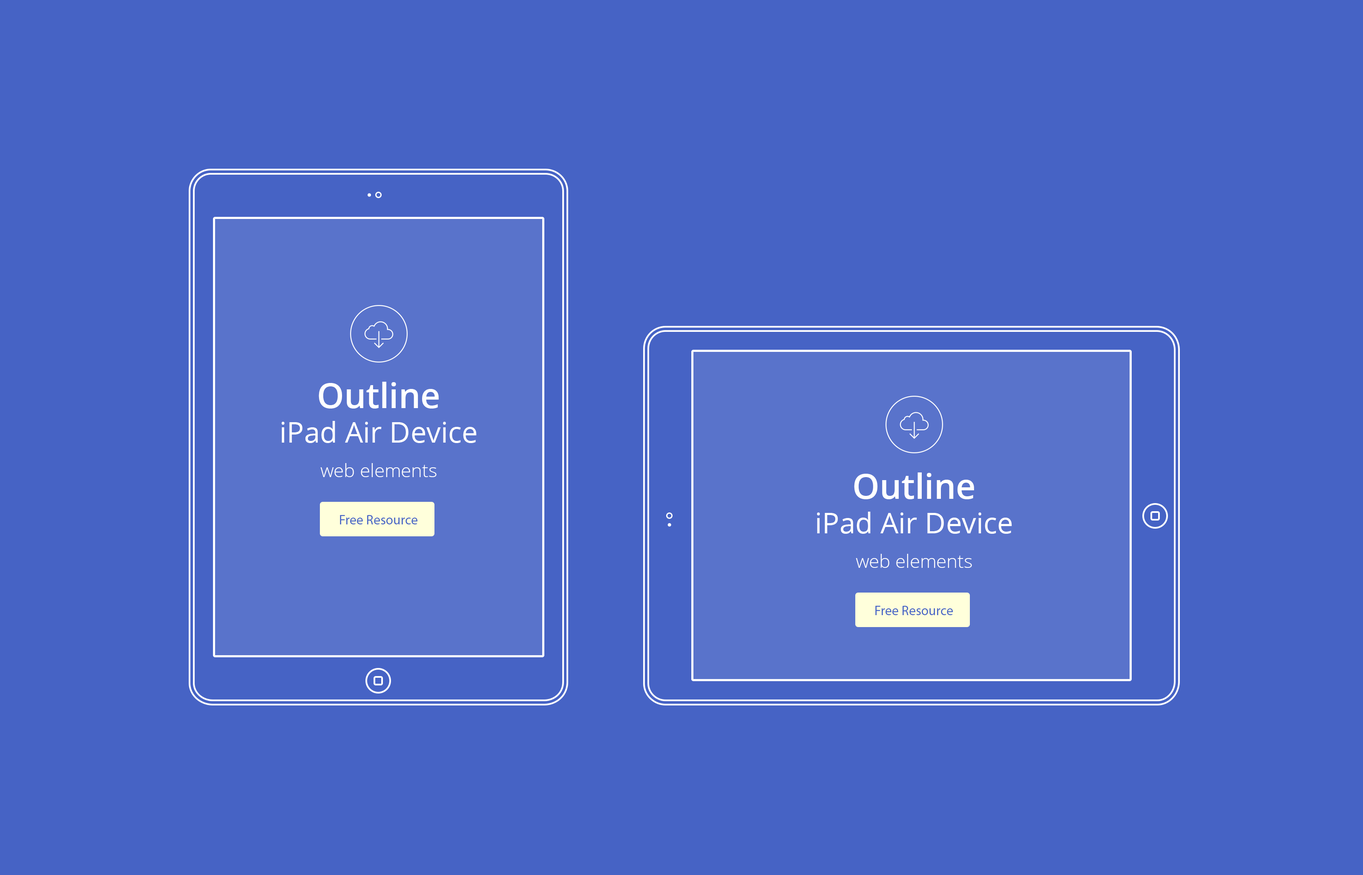
<style>
.page{position:relative;width:1363px;height:875px;background:#4663c5}
.page>*{position:absolute;margin:0}
.t1{font:28.7px/34.4px "OpenSans";color:#ffffff}
.t2{font:34.4px "OpenSans-Semibold";color:#ffffff}
.t3{font:18.6px/34.4px "OpenSans-Light";color:#ffffff}
.t4{font:13.6px "MyriadPro-Regular";color:#4664c6}
</style>
<div class="page">
<p class="t1" style="left:282px;top:382px;width:195px;height:95px;text-align:center"><span class="t2">Outline <br></span>iPad Air Device<br><span class="t3">web elements</span></p>
<p class="t1" style="left:817px;top:472px;width:195px;height:96px;text-align:center"><span class="t2">Outline <br></span>iPad Air Device<br><span class="t3">web elements</span></p>
<p class="t4" style="left:340px;top:515px;width:77px;height:9px">Free Resource</p>
<p class="t4" style="left:875px;top:606px;width:78px;height:9px">Free Resource</p>
</div>
